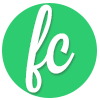
<style>
.page{position:relative;width:100px;height:100px;background:#2ecc71}
.page>*{position:absolute;margin:0}
.t1{font:85.3px "Lavanderia-Sturdy";color:#ffffff}
</style>
<div class="page">
<p class="t1" style="left:25px;top:4px;width:50px;height:89px">fc</p>
</div>
